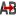
<style>
.page{position:relative;width:16px;height:16px;background:#ffffff}
.page>*{position:absolute;margin:0}
.t1{font:17.8px "Arial-BoldMT";scale:0.68 1}
</style>
<div class="page">
<p class="t1" style="left:0px;top:1px;width:17px;height:14px">AB</p>
</div>
